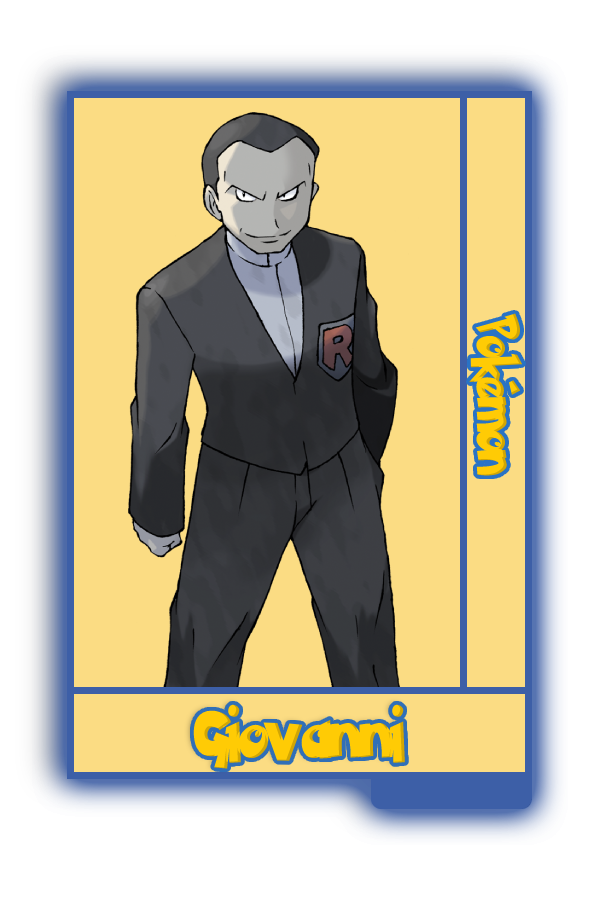
<style>
.page{position:relative;width:600px;height:900px;background:#fbdc83}
.page>*{position:absolute;margin:0}
.t1{font:48.8px "PokemonSolidNormal";color:#ffcb05;scale:0.8 1}
.t2{font:56.6px "PokemonSolidNormal";color:#ffcb05;scale:0.92 1}
</style>
<div class="page">
<p class="t1" style="left:469px;top:313px;width:54px;height:163px;rotate:90deg">Pokémon</p>
<p class="t2" style="left:193px;top:704px;width:212px;height:65px">Giovanni</p>
</div>
